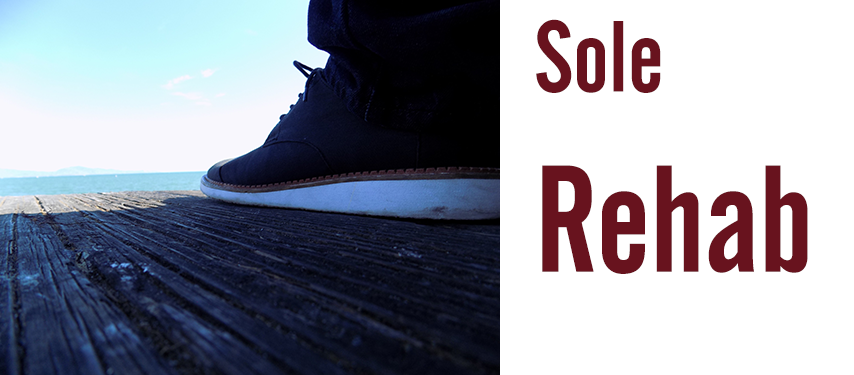
<style>
.page{position:relative;width:854px;height:375px;background:#ffffff}
.page>*{position:absolute;margin:0}
.t1{font:150px "AlternateGothicNo2BT-Regular";color:#68131e}
.t2{font:100px "AlternateGothicNo2BT-Regular";color:#68131e}
</style>
<div class="page">
<p class="t1" style="left:536px;top:19px;width:272px;height:255px"><span class="t2">Sole<br></span>Rehab</p>
</div>
